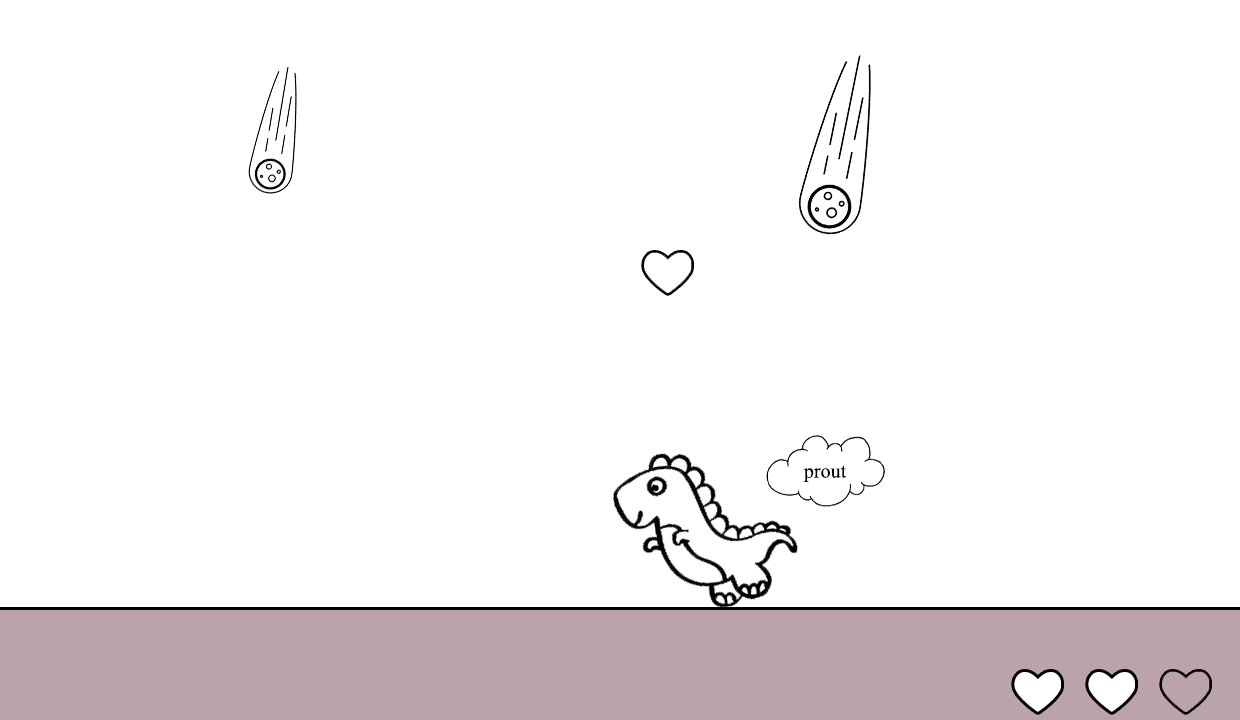
<style>
.page{position:relative;width:1240px;height:720px;background:#ffffff}
.page>*{position:absolute;margin:0}
.t1{font:20.1px "MongolianBaiti";color:#000000}
</style>
<div class="page">
<p class="t1" style="left:803px;top:465px;width:44px;height:17px">prout</p>
</div>
